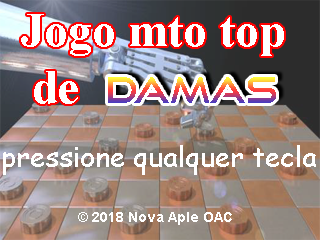
<style>
.page{position:relative;width:320px;height:240px}
.page>*{position:absolute;margin:0}
.t1{font:48px "TimesNewRomanPS-BoldMT";color:#ffffff}
.t2{font:36px "GoodTimesRg-Regular"}
.t3{font:28px "ComicSansMS";color:#ffffff}
.t4{font:14px "Arial-BoldMT";color:#ffffff}
</style>
<div class="page">
<p class="t1" style="left:21px;top:14px;width:263px;height:90px">Jogo mto top<br> de</p>
<p class="t2" style="left:108px;top:77px;width:168px;height:26px">DAMAS</p>
<p class="t3" style="left:3px;top:145px;width:313px;height:30px">pressione qualquer tecla</p>
<p class="t4" style="left:78px;top:212px;width:154px;height:13px">© 2018 Nova Aple OAC</p>
</div>
